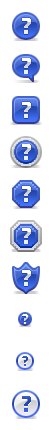
<style>
.page{position:relative;width:52px;height:430px;background:#ffffff}
.page>*{position:absolute;margin:0}
.t1{font:23.5px "InfoOTText-Bold"}
.t2{font:14.5px "InfoOTText-Bold"}
</style>
<div class="page">
<p class="t1" style="left:23px;top:18px;width:8px;height:17px">?</p>
<p class="t1" style="left:23px;top:58px;width:8px;height:17px">?</p>
<p class="t1" style="left:23px;top:144px;width:8px;height:17px">?</p>
<p class="t1" style="left:23px;top:270px;width:8px;height:17px">?</p>
<p class="t2" style="left:23px;top:314px;width:5px;height:10px">?</p>
</div>
